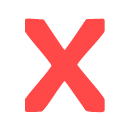
<style>
.page{position:relative;width:130px;height:130px;background:#ffffff}
.page>*{position:absolute;margin:0}
.t1{font:200px "BerlinSansFB-Reg";color:#ff4848}
</style>
<div class="page">
<p class="t1" style="left:25px;top:18px;width:80px;height:95px">x</p>
</div>
